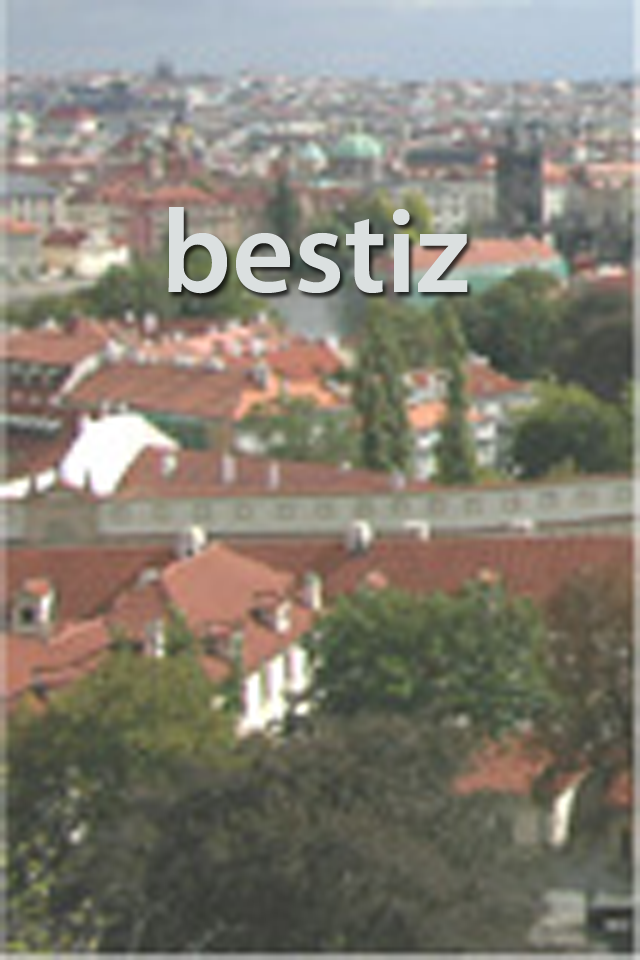
<style>
.page{position:relative;width:640px;height:960px}
.page>*{position:absolute;margin:0}
.t1{font:120px "MyriadPro-Semibold";color:#dbe0e0}
</style>
<div class="page">
<p class="t1" style="left:168px;top:207px;width:300px;height:87px">bestiz</p>
</div>
